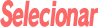
<style>
.page{position:relative;width:98px;height:28px;background:#ffffff}
.page>*{position:absolute;margin:0}
.t1{font:32px "RodinPro-EB";letter-spacing:-0.051em;color:#fa6867;font-style:italic;scale:0.6 1}
</style>
<div class="page">
<p class="t1" style="left:0px;top:0px;width:98px;height:27px">Selecionar</p>
</div>
